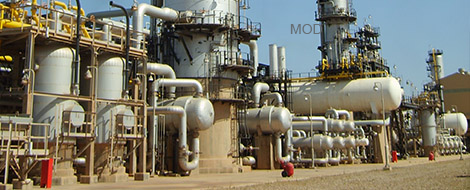
<style>
.page{position:relative;width:470px;height:190px}
.page>*{position:absolute;margin:0}
.t1{font:14px "ArialMT";color:#666f74}
</style>
<div class="page">
<p class="t1" style="left:290px;top:24px;width:32px;height:10px">MOD</p>
</div>
